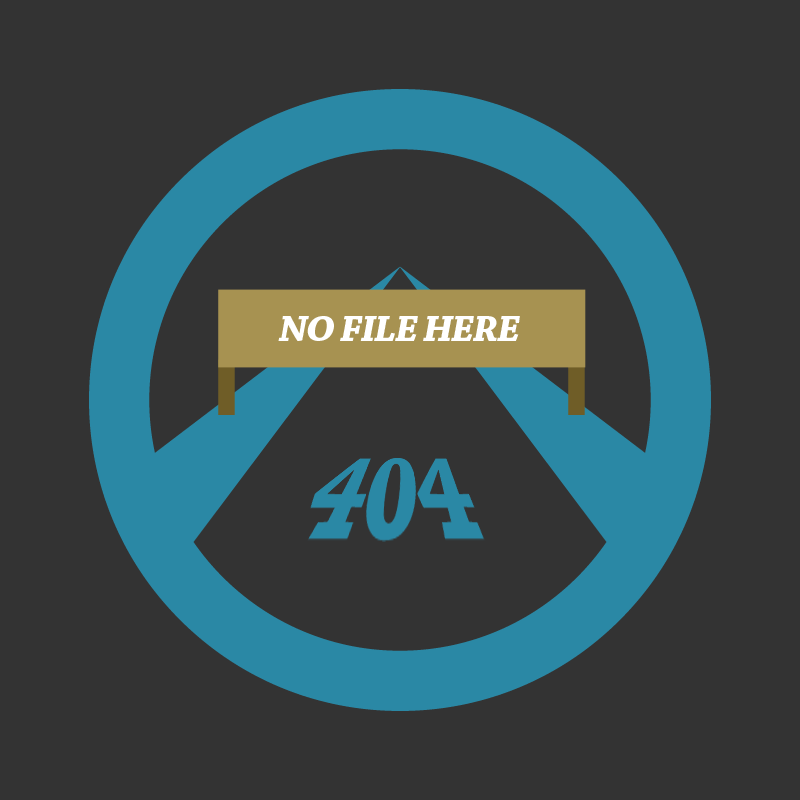
<style>
.page{position:relative;width:800px;height:800px;background:#333333}
.page>*{position:absolute;margin:0}
.t1{font:37.5px "ChaparralPro-BoldIt";letter-spacing:-0.035em;color:#ffffff;scale:1.08 1}
</style>
<div class="page">
<p class="t1" style="left:278px;top:316px;width:242px;height:25px">NO FILE HERE</p>
</div>
